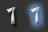
<style>
.page{position:relative;width:48px;height:32px;background:#333333}
.page>*{position:absolute;margin:0}
.t1{font:25px "DomoAregatoNormal"}
</style>
<div class="page">
<p class="t1" style="left:6px;top:7px;width:10px;height:17px">1</p>
<p class="t1" style="left:30px;top:7px;width:10px;height:17px">1</p>
</div>
